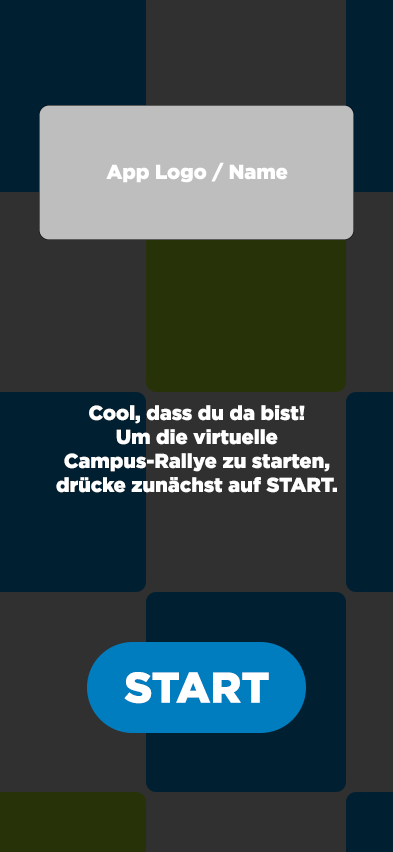
<style>
.page{position:relative;width:393px;height:852px;background:#303030}
.page>*{position:absolute;margin:0}
.t1{font:20px "Gotham-Black";color:#ffffff}
.t2{font:43px "Gotham-Black";color:#ffffff}
</style>
<div class="page">
<p class="t1" style="left:106px;top:162px;width:182px;height:21px">App Logo / Name</p>
<p class="t1" style="left:56px;top:405px;width:281px;height:88px;text-align:center">Cool, dass du da bist!<br>Um die virtuelle<br>Campus-Rallye zu starten,<br>drücke zunächst auf START.</p>
<p class="t2" style="left:124px;top:672px;width:145px;height:32px">START</p>
</div>
